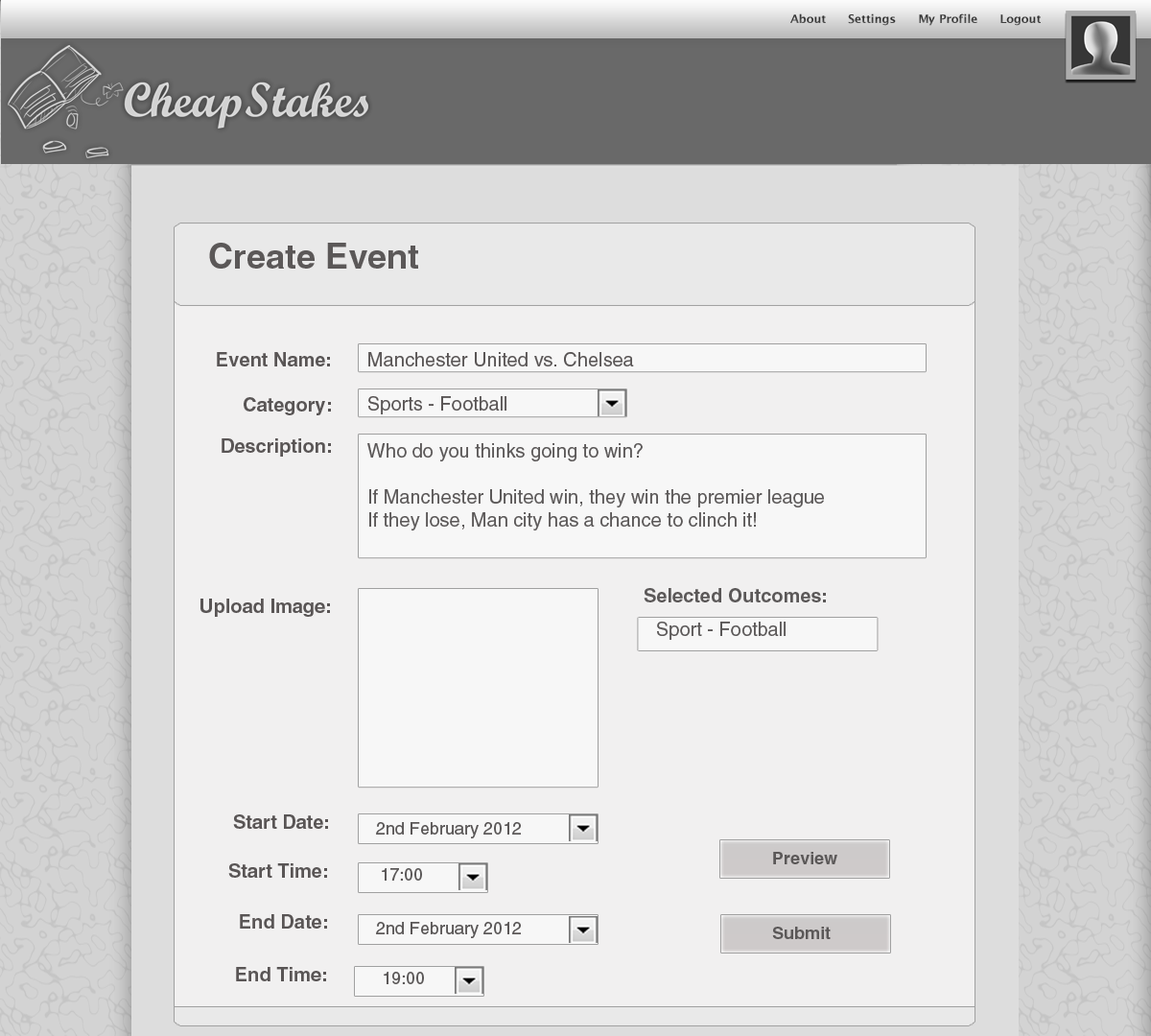
<style>
.page{position:relative;width:1151px;height:1036px;background:#f1f0f0}
.page>*{position:absolute;margin:0}
.t1{font:34.5px "HelveticaLTStd-Bold";color:#5b5858}
.t2{font:19.2px "HelveticaLTStd-Bold";color:#595555}
.t3{font:19.2px "HelveticaLTStd-Roman";color:#595555}
.t4{font:19.2px "HelveticaLTStd-Roman";color:#5b5858}
.t5{font:19.2px "HelveticaLTStd-Bold";color:#5b5858}
.t6{font:17.3px "HelveticaLTStd-Roman";color:#5b5858}
.t7{font:17.3px "HelveticaLTStd-Bold";color:#5b5858}
</style>
<div class="page">
<p class="t1" style="left:209px;top:243px;width:209px;height:26px">Create Event</p>
<p class="t2" style="left:217px;top:352px;width:113px;height:14px">Event Name:</p>
<p class="t3" style="left:368px;top:352px;width:266px;height:14px">Manchester United vs. Chelsea</p>
<p class="t2" style="left:244px;top:397px;width:87px;height:18px">Category:</p>
<p class="t3" style="left:368px;top:396px;width:138px;height:18px">Sports - Football</p>
<p class="t2" style="left:222px;top:438px;width:109px;height:19px">Description:</p>
<p class="t4" style="left:367px;top:443px;width:457px;height:87px">Who do you thinks going to win?<br><br>If Manchester United win, they win the premier league<br>If they lose, Man city has a chance to clinch it!</p>
<p class="t5" style="left:644px;top:588px;width:182px;height:14px">Selected Outcomes:</p>
<p class="t2" style="left:200px;top:599px;width:130px;height:18px">Upload Image:</p>
<p class="t4" style="left:657px;top:622px;width:129px;height:18px">Sport - Football</p>
<p class="t2" style="left:233px;top:814px;width:95px;height:15px">Start Date:</p>
<p class="t6" style="left:376px;top:822px;width:145px;height:16px">2nd February 2012</p>
<p class="t7" style="left:773px;top:852px;width:64px;height:12px">Preview</p>
<p class="t2" style="left:228px;top:863px;width:99px;height:15px">Start Time:</p>
<p class="t6" style="left:382px;top:868px;width:40px;height:13px">17:00</p>
<p class="t2" style="left:240px;top:914px;width:87px;height:15px">End Date:</p>
<p class="t6" style="left:376px;top:922px;width:145px;height:16px">2nd February 2012</p>
<p class="t7" style="left:772px;top:927px;width:59px;height:12px">Submit</p>
<p class="t2" style="left:236px;top:967px;width:90px;height:14px">End Time:</p>
<p class="t6" style="left:384px;top:972px;width:40px;height:12px">19:00</p>
</div>
